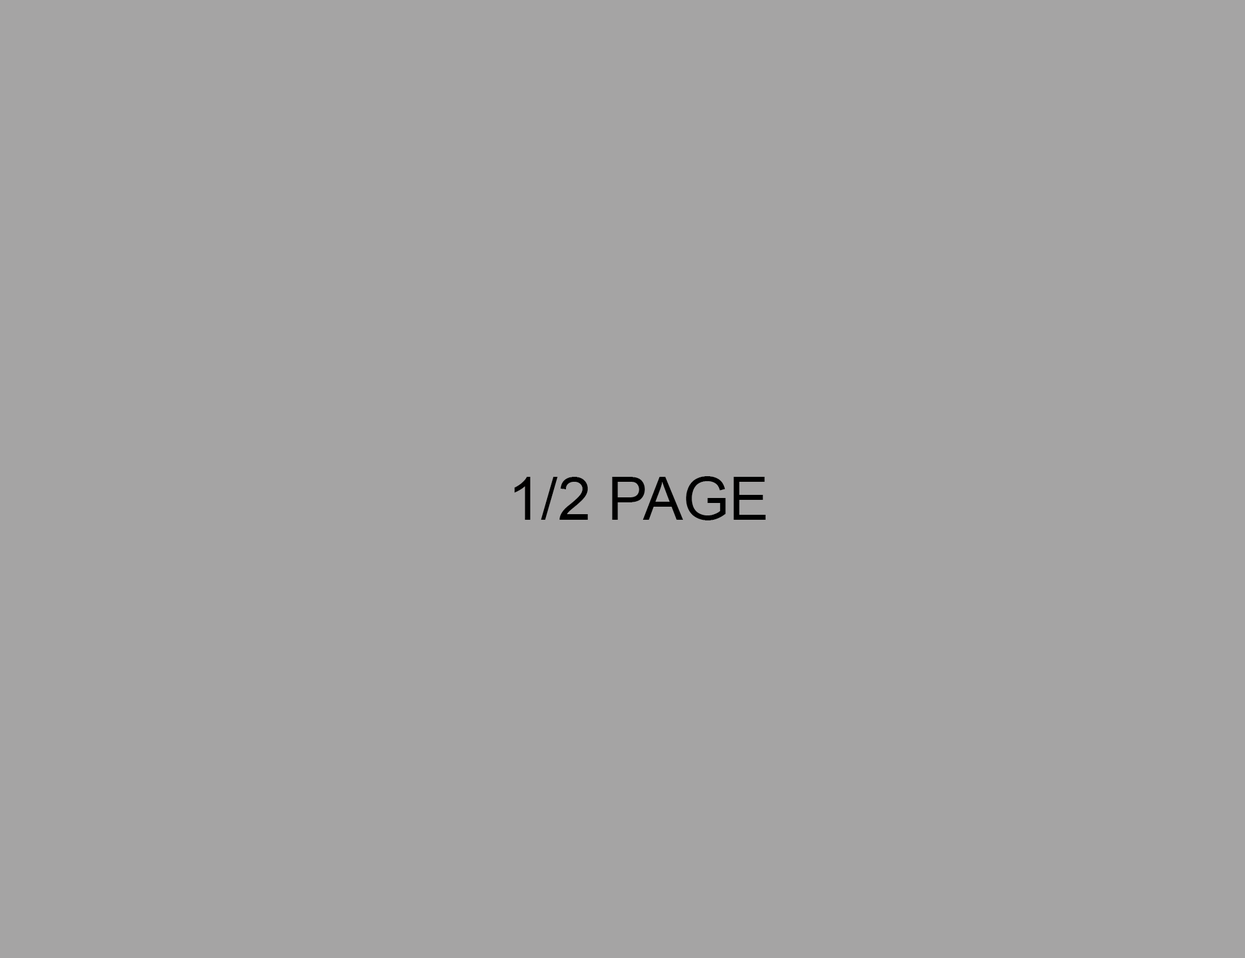
<style>
.page{position:relative;width:1245px;height:958px;background:#a5a4a4}
.page>*{position:absolute;margin:0}
.t1{font:59.8px "ArialMT";color:#000000}
</style>
<div class="page">
<p class="t1" style="left:514px;top:476px;width:252px;height:44px">1/2 PAGE</p>
</div>
